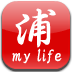
<style>
.page{position:relative;width:72px;height:72px}
.page>*{position:absolute;margin:0}
.t1{font:45.7px "HGPGyoshotai";color:#ffffff}
.t2{font:17.1px "HGPGyoshotai";color:#ffffff}
</style>
<div class="page">
<p class="t1" style="left:15px;top:8px;width:41px;height:40px">浦</p>
<p class="t2" style="left:12px;top:48px;width:50px;height:16px">my life</p>
</div>
